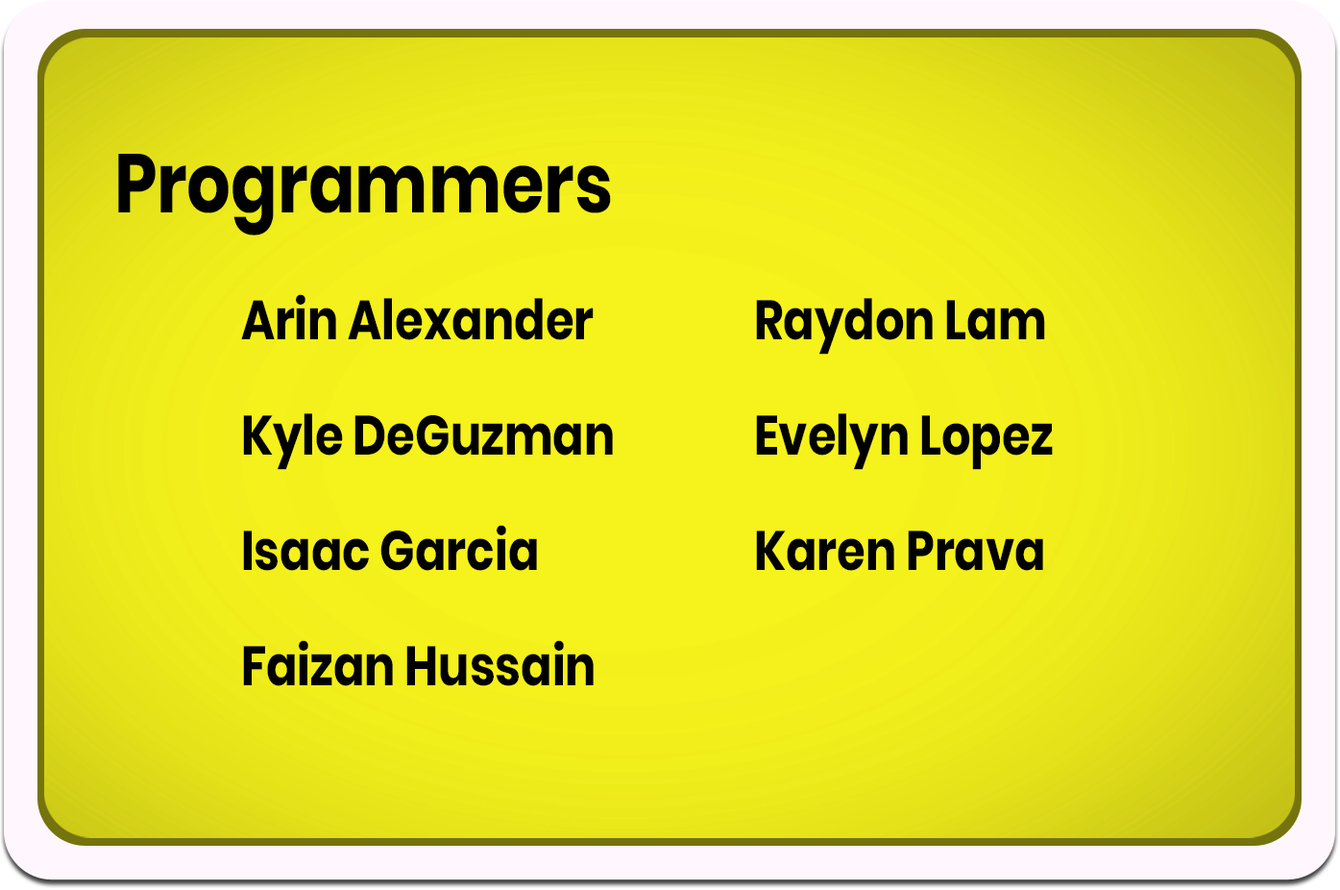
<style>
.page{position:relative;width:1340px;height:890px}
.page>*{position:absolute;margin:0}
.t1{font:83px "Poppins-Bold";color:#010101;scale:0.83 1}
.t2{font:55.3px/115.3px "Poppins-Bold";color:#010101;scale:0.83 1}
</style>
<div class="page">
<p class="t1" style="left:118px;top:154px;width:493px;height:81px">Programmers</p>
<p class="t2" style="left:241px;top:294px;width:372px;height:392px">Arin Alexander<br>Kyle DeGuzman<br>Isaac Garcia<br>Faizan Hussain</p>
<p class="t2" style="left:756px;top:298px;width:297px;height:273px">Raydon Lam<br>Evelyn Lopez<br>Karen Prava</p>
</div>
